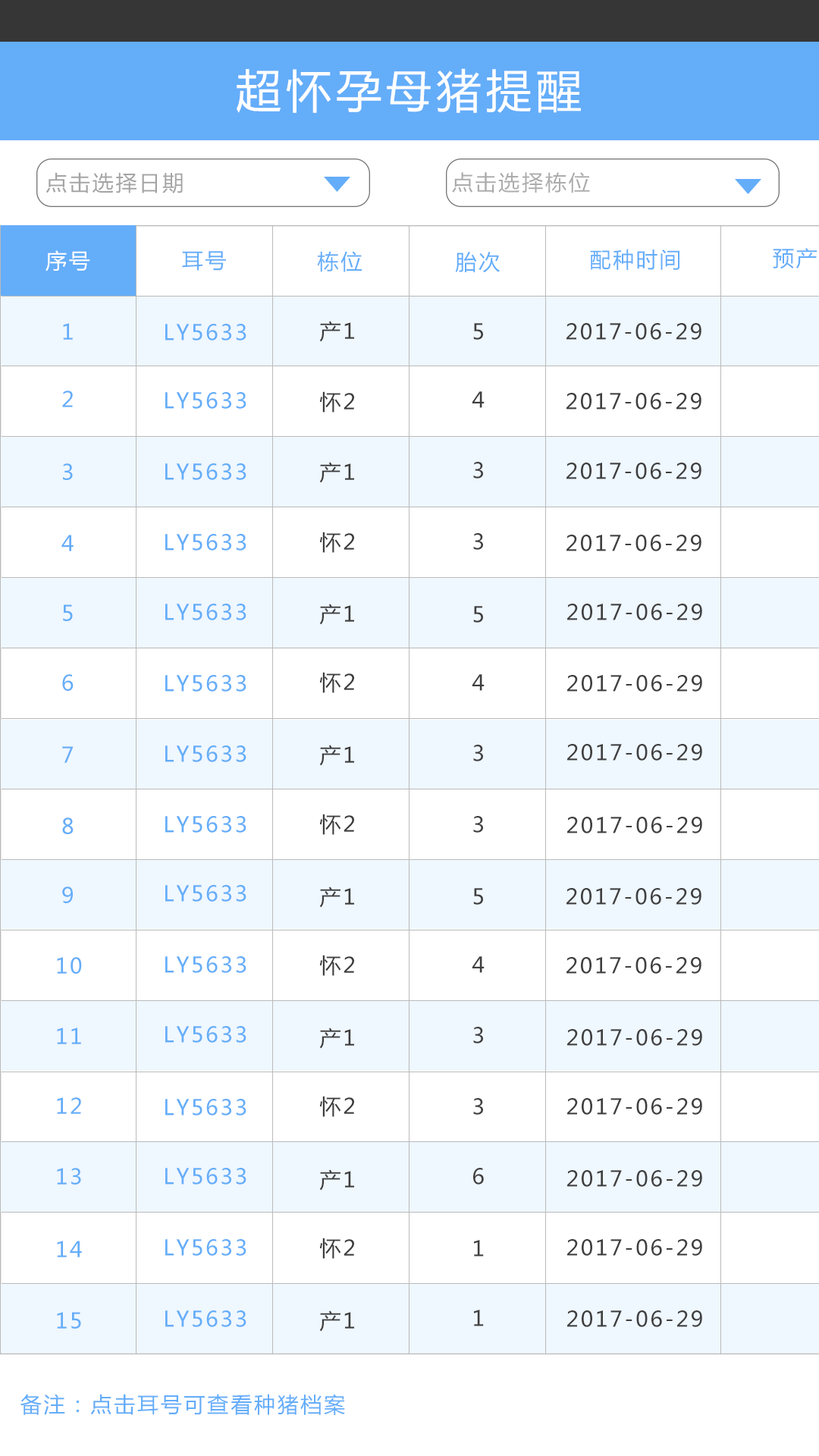
<style>
.page{position:relative;width:819px;height:1456px;background:#ffffff}
.page>*{position:absolute;margin:0}
.t1{font:45.5px "MicrosoftYaHei";letter-spacing:0.1em;color:#ffffff}
.t2{font:21.2px "MicrosoftYaHei";letter-spacing:0.1em;color:#a4a4a4}
.t3{font:21.2px "MicrosoftYaHei";letter-spacing:0.1em;color:#acacac}
.t4{font:21.2px "MicrosoftYaHei";letter-spacing:0.1em;color:#ffffff}
.t5{font:21.2px "MicrosoftYaHei";letter-spacing:0.1em;color:#64adf9}
.t6{font:21.2px "MicrosoftYaHei";letter-spacing:0.1em;color:#3c3c3c}
.t7{font:21.2px "MicrosoftYaHei";letter-spacing:0.1em;color:#3f3f3f}
</style>
<div class="page">
<p class="t1" style="left:237px;top:68px;width:344px;height:45px">超怀孕母猪提醒</p>
<p class="t2" style="left:45px;top:172px;width:138px;height:21px">点击选择日期</p>
<p class="t3" style="left:452px;top:172px;width:138px;height:21px">点击选择栋位</p>
<p class="t4" style="left:45px;top:250px;width:45px;height:21px">序号</p>
<p class="t5" style="left:182px;top:251px;width:44px;height:20px">耳号</p>
<p class="t5" style="left:317px;top:251px;width:45px;height:21px">栋位</p>
<p class="t5" style="left:455px;top:252px;width:45px;height:21px">胎次</p>
<p class="t5" style="left:590px;top:249px;width:89px;height:21px">配种时间</p>
<p class="t5" style="left:773px;top:248px;width:44px;height:21px">预产</p>
<p class="t5" style="left:63px;top:323px;width:10px;height:17px">1</p>
<p class="t5" style="left:165px;top:324px;width:81px;height:16px">LY5633</p>
<p class="t6" style="left:319px;top:321px;width:35px;height:21px">产1</p>
<p class="t7" style="left:473px;top:323px;width:10px;height:17px">5</p>
<p class="t7" style="left:566px;top:323px;width:135px;height:17px">2017-06-29</p>
<p class="t5" style="left:62px;top:391px;width:11px;height:16px">2</p>
<p class="t5" style="left:165px;top:392px;width:81px;height:17px">LY5633</p>
<p class="t6" style="left:319px;top:391px;width:35px;height:22px">怀2</p>
<p class="t7" style="left:472px;top:391px;width:13px;height:17px">4</p>
<p class="t7" style="left:566px;top:393px;width:135px;height:16px">2017-06-29</p>
<p class="t6" style="left:319px;top:462px;width:35px;height:21px">产1</p>
<p class="t7" style="left:473px;top:462px;width:10px;height:17px">3</p>
<p class="t5" style="left:63px;top:463px;width:10px;height:17px">3</p>
<p class="t5" style="left:165px;top:463px;width:81px;height:17px">LY5633</p>
<p class="t7" style="left:566px;top:463px;width:135px;height:16px">2017-06-29</p>
<p class="t5" style="left:165px;top:534px;width:81px;height:17px">LY5633</p>
<p class="t6" style="left:319px;top:532px;width:35px;height:21px">怀2</p>
<p class="t7" style="left:473px;top:533px;width:10px;height:17px">3</p>
<p class="t5" style="left:61px;top:535px;width:13px;height:16px">4</p>
<p class="t7" style="left:566px;top:535px;width:135px;height:16px">2017-06-29</p>
<p class="t5" style="left:63px;top:604px;width:10px;height:17px">5</p>
<p class="t5" style="left:165px;top:604px;width:81px;height:16px">LY5633</p>
<p class="t6" style="left:319px;top:604px;width:35px;height:21px">产1</p>
<p class="t7" style="left:473px;top:606px;width:10px;height:17px">5</p>
<p class="t7" style="left:567px;top:604px;width:135px;height:16px">2017-06-29</p>
<p class="t5" style="left:62px;top:674px;width:12px;height:17px">6</p>
<p class="t5" style="left:165px;top:675px;width:81px;height:17px">LY5633</p>
<p class="t6" style="left:319px;top:672px;width:35px;height:21px">怀2</p>
<p class="t7" style="left:472px;top:674px;width:13px;height:17px">4</p>
<p class="t7" style="left:567px;top:675px;width:135px;height:17px">2017-06-29</p>
<p class="t5" style="left:62px;top:746px;width:12px;height:17px">7</p>
<p class="t5" style="left:165px;top:745px;width:81px;height:17px">LY5633</p>
<p class="t6" style="left:319px;top:745px;width:35px;height:21px">产1</p>
<p class="t7" style="left:473px;top:745px;width:10px;height:16px">3</p>
<p class="t7" style="left:567px;top:744px;width:135px;height:17px">2017-06-29</p>
<p class="t5" style="left:62px;top:817px;width:12px;height:17px">8</p>
<p class="t5" style="left:165px;top:816px;width:81px;height:17px">LY5633</p>
<p class="t6" style="left:319px;top:814px;width:35px;height:21px">怀2</p>
<p class="t7" style="left:473px;top:816px;width:10px;height:17px">3</p>
<p class="t7" style="left:567px;top:817px;width:135px;height:16px">2017-06-29</p>
<p class="t5" style="left:62px;top:886px;width:11px;height:17px">9</p>
<p class="t5" style="left:165px;top:885px;width:81px;height:17px">LY5633</p>
<p class="t6" style="left:319px;top:886px;width:35px;height:22px">产1</p>
<p class="t7" style="left:473px;top:888px;width:10px;height:17px">5</p>
<p class="t7" style="left:566px;top:888px;width:135px;height:17px">2017-06-29</p>
<p class="t5" style="left:57px;top:957px;width:25px;height:17px">10</p>
<p class="t5" style="left:165px;top:956px;width:81px;height:17px">LY5633</p>
<p class="t6" style="left:319px;top:955px;width:35px;height:21px">怀2</p>
<p class="t7" style="left:472px;top:956px;width:13px;height:17px">4</p>
<p class="t7" style="left:566px;top:957px;width:135px;height:17px">2017-06-29</p>
<p class="t5" style="left:57px;top:1028px;width:24px;height:16px">11</p>
<p class="t5" style="left:165px;top:1026px;width:81px;height:17px">LY5633</p>
<p class="t6" style="left:319px;top:1028px;width:35px;height:21px">产1</p>
<p class="t7" style="left:473px;top:1027px;width:10px;height:16px">3</p>
<p class="t7" style="left:567px;top:1029px;width:135px;height:17px">2017-06-29</p>
<p class="t5" style="left:57px;top:1097px;width:24px;height:17px">12</p>
<p class="t6" style="left:319px;top:1096px;width:35px;height:21px">怀2</p>
<p class="t5" style="left:165px;top:1099px;width:81px;height:16px">LY5633</p>
<p class="t7" style="left:473px;top:1098px;width:10px;height:17px">3</p>
<p class="t7" style="left:567px;top:1098px;width:135px;height:17px">2017-06-29</p>
<p class="t5" style="left:57px;top:1168px;width:24px;height:17px">13</p>
<p class="t5" style="left:165px;top:1168px;width:81px;height:17px">LY5633</p>
<p class="t6" style="left:319px;top:1169px;width:35px;height:22px">产1</p>
<p class="t7" style="left:473px;top:1168px;width:11px;height:17px">6</p>
<p class="t7" style="left:567px;top:1170px;width:135px;height:17px">2017-06-29</p>
<p class="t5" style="left:57px;top:1241px;width:25px;height:16px">14</p>
<p class="t5" style="left:165px;top:1239px;width:81px;height:17px">LY5633</p>
<p class="t6" style="left:319px;top:1238px;width:35px;height:21px">怀2</p>
<p class="t7" style="left:474px;top:1240px;width:10px;height:17px">1</p>
<p class="t7" style="left:567px;top:1239px;width:135px;height:17px">2017-06-29</p>
<p class="t5" style="left:57px;top:1312px;width:24px;height:17px">15</p>
<p class="t5" style="left:165px;top:1310px;width:81px;height:17px">LY5633</p>
<p class="t6" style="left:319px;top:1310px;width:35px;height:22px">产1</p>
<p class="t7" style="left:474px;top:1310px;width:10px;height:16px">1</p>
<p class="t7" style="left:567px;top:1310px;width:135px;height:17px">2017-06-29</p>
<p class="t5" style="left:20px;top:1394px;width:325px;height:21px">备注：点击耳号可查看种猪档案</p>
</div>
